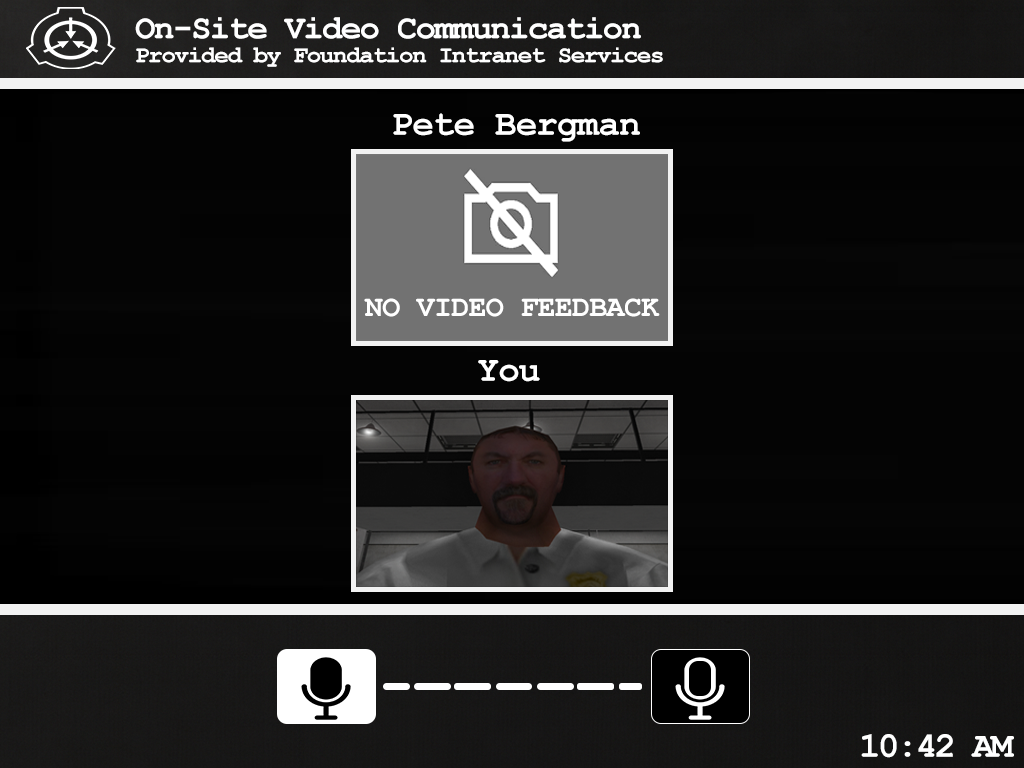
<style>
.page{position:relative;width:1024px;height:768px;background:#040404}
.page>*{position:absolute;margin:0}
.t1{font:24px/24px "CourierNewPS-BoldMT";letter-spacing:-0.05em;color:#ffffff}
.t2{font:34px/24px "CourierNewPS-BoldMT";letter-spacing:-0.05em;color:#ffffff}
.t3{font:36px "CourierNewPS-BoldMT";letter-spacing:-0.025em;color:#ffffff}
.t4{font:30px "CourierNewPS-BoldMT";letter-spacing:-0.025em;color:#ffffff}
.t5{font:36px "CourierNewPS-BoldMT";letter-spacing:-0.075em;color:#ffffff}
</style>
<div class="page">
<p class="t1" style="left:135px;top:17px;width:528px;height:50px"><span class="t2">On-Site Video Communication<br></span>Provided by Foundation Intranet Services</p>
<p class="t3" style="left:393px;top:113px;width:247px;height:29px">Pete Bergman</p>
<p class="t4" style="left:364px;top:298px;width:296px;height:19px">NO VIDEO FEEDBACK</p>
<p class="t3" style="left:478px;top:360px;width:62px;height:22px">You</p>
<p class="t5" style="left:861px;top:734px;width:153px;height:24px">10:42 AM</p>
</div>
